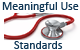
<style>
.page{position:relative;width:80px;height:50px;background:#ffffff}
.page>*{position:absolute;margin:0}
.t1{font:12px "Calibri";color:#0f3654}
</style>
<div class="page">
<p class="t1" style="left:2px;top:2px;width:77px;height:10px">Meaningful Use</p>
<p class="t1" style="left:14px;top:41px;width:49px;height:8px">Standards</p>
</div>
